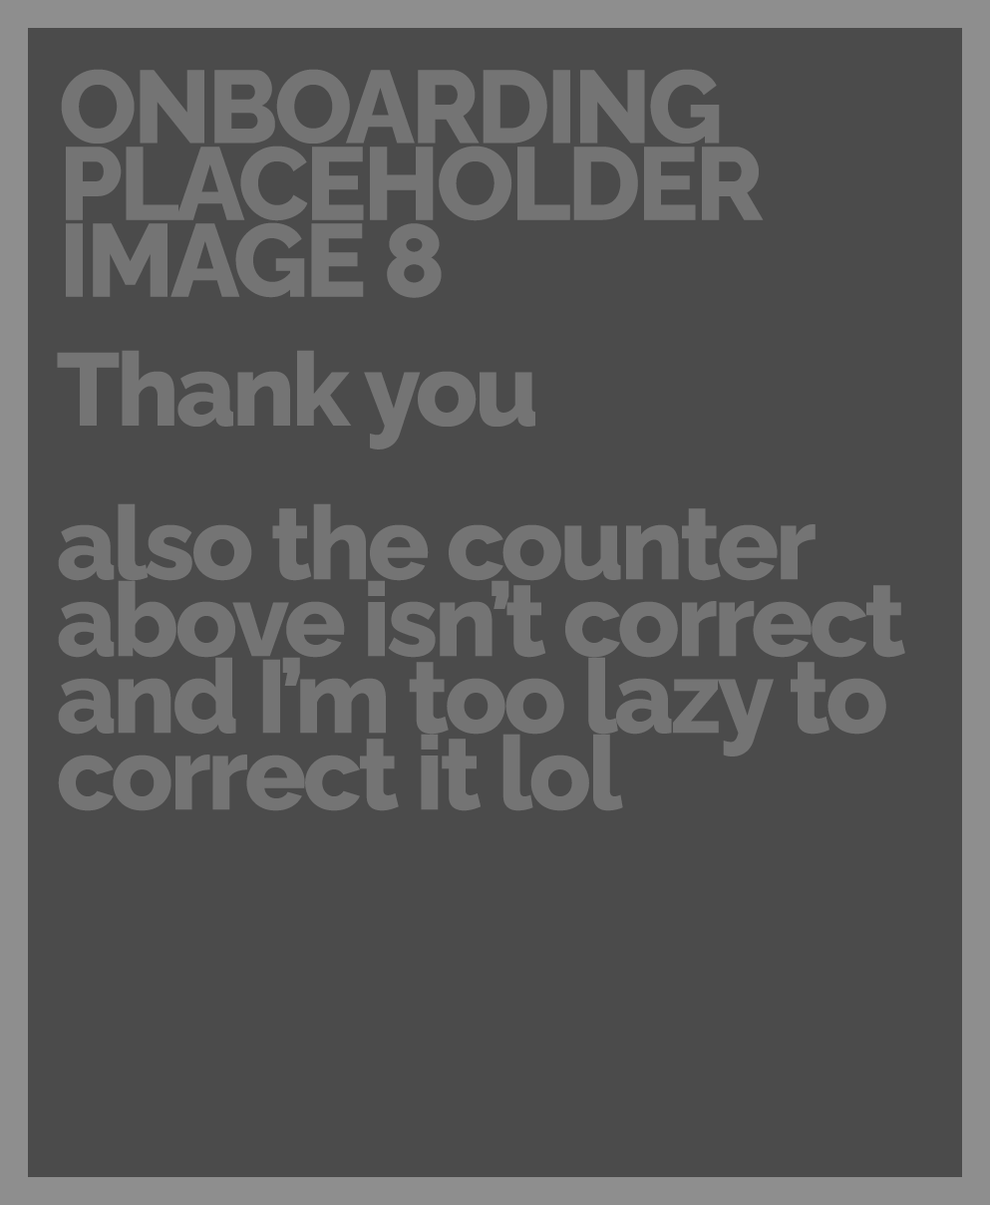
<style>
.page{position:relative;width:990px;height:1205px;background:#4b4b4b}
.page>*{position:absolute;margin:0}
.t1{font:102.7px/76.8px "Raleway-ExtraBold";letter-spacing:-0.035em;color:#747474}
</style>
<div class="page">
<p class="t1" style="left:61px;top:69px;width:702px;height:229px">ONBOARDING<br>PLACEHOLDER<br>IMAGE 8</p>
<p class="t1" style="left:57px;top:350px;width:848px;height:461px">Thank you<br><br>also the counter<br>above isn’t correct<br>and I’m too lazy to<br>correct it lol</p>
</div>
